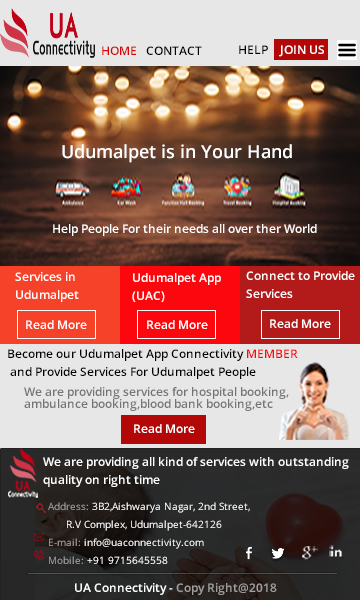
<style>
.page{position:relative;width:360px;height:600px;background:#e7e7e7}
.page>*{position:absolute;margin:0}
.t1{font:12px "OpenSans-Semibold";color:#d80505}
.t2{font:12px "OpenSans-Semibold";color:#030000}
.t3{font:12px "OpenSans-Semibold";color:#ffffff}
.t4{font:18px "OpenSans-Semibold";color:#ffffff}
.t5{font:12px/6px "OpenSans-Semibold";color:#ffffff}
.t6{font:12px/6px "OpenSans-Semibold";color:#030000}
.t7{font:12px/6px "OpenSans-Semibold";color:#f60b0b}
.t8{font:12px/6px "OpenSans-Semibold";color:#757373}
.t9{font:12px "OpenSans-Semibold";color:#757373}
.t10{font:10px/6px "OpenSans";color:#ffffff}
.t11{font:10px/6px "OpenSans";color:#a39f9f}
.t12{font:12px "OpenSans-Semibold";color:#a09d9d}
</style>
<div class="page">
<p class="t1" style="left:102px;top:46px;width:34px;height:9px">HOME</p>
<p class="t2" style="left:146px;top:46px;width:56px;height:9px">CONTACT</p>
<p class="t2" style="left:239px;top:45px;width:29px;height:9px">HELP</p>
<p class="t3" style="left:279px;top:45px;width:45px;height:12px">JOIN US</p>
<p class="t4" style="left:62px;top:144px;width:230px;height:19px">Udumalpet is in Your Hand</p>
<p class="t3" style="left:53px;top:224px;width:264px;height:12px">Help People For their needs all over ther World</p>
<p class="t5" style="left:15px;top:272px;width:64px;height:30px">Services in <br><br><br>Udumalpet</p>
<p class="t5" style="left:132px;top:273px;width:89px;height:29px">Udumalpet App<br><br><br>(UAC)</p>
<p class="t5" style="left:246px;top:271px;width:109px;height:27px">Connect to Provide<br><br><br>Services</p>
<p class="t3" style="left:26px;top:320px;width:61px;height:9px">Read More</p>
<p class="t3" style="left:147px;top:320px;width:61px;height:9px">Read More</p>
<p class="t3" style="left:270px;top:319px;width:61px;height:9px">Read More</p>
<p class="t6" style="left:8px;top:349px;width:290px;height:30px">Become our Udumalpet App Connectivity <span class="t7">MEMBER<br></span><br><br> and Provide Services For Udumalpet People</p>
<p class="t8" style="left:24px;top:387px;width:265px;height:24px">We are providing services for hospital booking,<br><br>ambulance booking,blood bank booking,etc</p>
<p class="t3" style="left:134px;top:424px;width:61px;height:9px"><span class="t9"><br><br>   </span>Read More</p>
<p class="t5" style="left:43px;top:457px;width:306px;height:30px">We are providing all kind of services with outstanding <br><br><br>quality on right time</p>
<p class="t10" style="left:48px;top:502px;width:202px;height:62px"><span class="t11">Address:</span> 3B2,Aishwarya Nagar, 2nd Street,<br><br><br>      R.V Complex, Udumalpet-642126<br><br><br><span class="t11">E-mail: </span>info@uaconnectivity.com<br><br><br><span class="t11">Mobile:</span> +91 9715645558</p>
<p class="t3" style="left:75px;top:583px;width:202px;height:12px">UA Connectivity - <span class="t12">Copy Right@2018</span></p>
</div>
